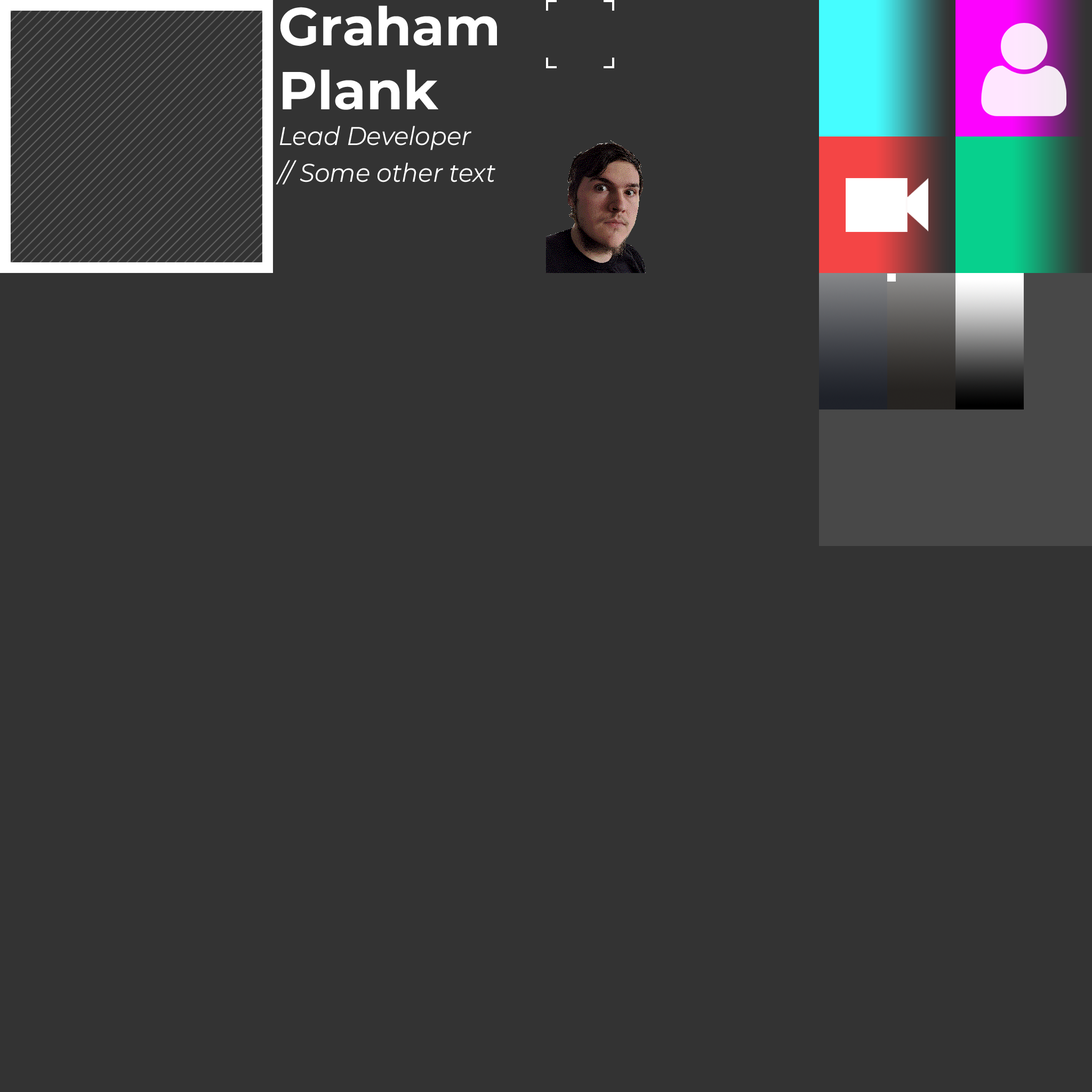
<style>
.page{position:relative;width:1092px;height:1092px;background:#333333}
.page>*{position:absolute;margin:0}
.t1{font:53.3px "Montserrat-Bold";color:#ffffff}
.t2{font:25.6px "Montserrat-Italic";color:#ffffff;scale:0.95 1}
</style>
<div class="page">
<p class="t1" style="left:280px;top:5px;width:217px;height:105px">Graham<br>Plank</p>
<p class="t2" style="left:279px;top:126px;width:192px;height:24px">Lead Developer</p>
<p class="t2" style="left:276px;top:160px;width:219px;height:24px">// Some other text</p>
</div>
